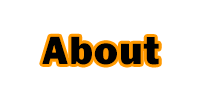
<style>
.page{position:relative;width:200px;height:100px;background:#ffffff}
.page>*{position:absolute;margin:0}
.t1{font:40.6px "FranklinGothic-Heavy";letter-spacing:0.025em;color:#ff8400}
</style>
<div class="page">
<p class="t1" style="left:42px;top:36px;width:117px;height:29px">About</p>
</div>
